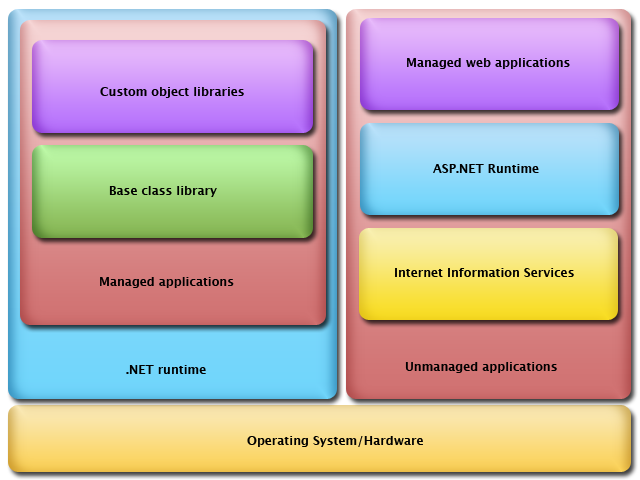
<style>
.page{position:relative;width:640px;height:480px}
.page>*{position:absolute;margin:0}
.t1{font:12px "LucidaGrande-Bold";color:#000000}
</style>
<div class="page">
<p class="t1" style="left:407px;top:58px;width:163px;height:11px">Managed web applications</p>
<p class="t1" style="left:100px;top:87px;width:144px;height:11px">Custom object libraries</p>
<p class="t1" style="left:433px;top:164px;width:106px;height:9px">ASP.NET Runtime</p>
<p class="t1" style="left:109px;top:186px;width:108px;height:11px">Base class library</p>
<p class="t1" style="left:395px;top:268px;width:179px;height:9px">Internet Information Services</p>
<p class="t1" style="left:100px;top:277px;width:134px;height:11px">Managed applications</p>
<p class="t1" style="left:126px;top:365px;width:80px;height:9px">.NET runtime</p>
<p class="t1" style="left:405px;top:362px;width:152px;height:11px">Unmanaged applications</p>
<p class="t1" style="left:247px;top:436px;width:176px;height:11px">Operating System/Hardware</p>
</div>
